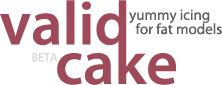
<style>
.page{position:relative;width:222px;height:85px;background:#ffffff}
.page>*{position:absolute;margin:0}
.t1{font:15px "MyriadPro-Regular";color:#606060}
.t2{font:12px "MyriadPro-Regular";color:#d5d5d5}
</style>
<div class="page">
<p class="t1" style="left:129px;top:9px;width:81px;height:15px">yummy icing</p>
<p class="t1" style="left:135px;top:23px;width:87px;height:12px">for fat models</p>
<p class="t2" style="left:32px;top:53px;width:26px;height:9px">BETA</p>
</div>
